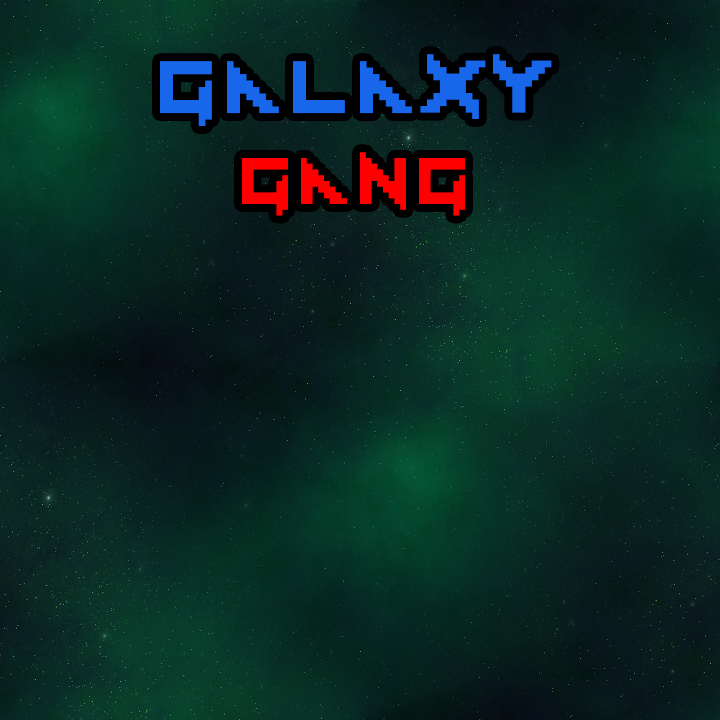
<style>
.page{position:relative;width:720px;height:720px}
.page>*{position:absolute;margin:0}
.t1{font:103.5px "Vermin-Vibes-1989";letter-spacing:0.08em;color:#1867ea}
.t2{font:92px "Vermin-Vibes-1989";letter-spacing:0.08em;color:#ff0000}
</style>
<div class="page">
<p class="t1" style="left:160px;top:54px;width:392px;height:72px">Galaxy</p>
<p class="t2" style="left:242px;top:152px;width:223px;height:64px">Gang</p>
</div>
